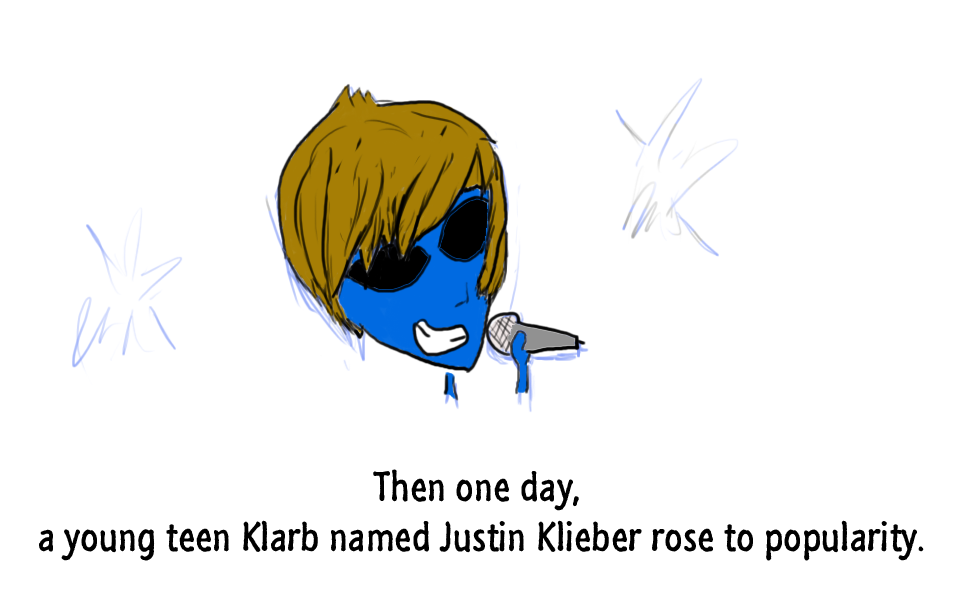
<style>
.page{position:relative;width:960px;height:600px;background:#ffffff}
.page>*{position:absolute;margin:0}
.t1{font:42px "SegoeMarker";color:#000000}
</style>
<div class="page">
<p class="t1" style="left:39px;top:469px;width:885px;height:92px;text-align:center">Then one day, <br>a young teen Klarb named Justin Klieber rose to popularity.</p>
</div>
